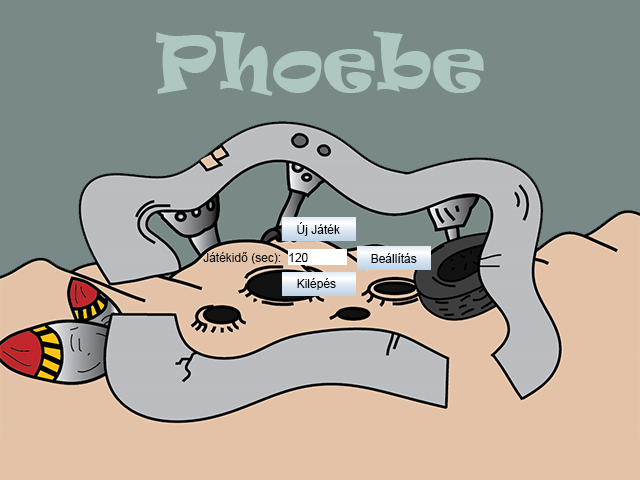
<style>
.page{position:relative;width:640px;height:480px;background:#798987}
.page>*{position:absolute;margin:0}
.t1{font:72px "Ravie";color:#afc8c4}
.t2{font:12px "ArialMT";color:#000000}
.t3{font:12px "ArialMT";color:#0c0e0e}
</style>
<div class="page">
<p class="t1" style="left:156px;top:31px;width:328px;height:65px">Phoebe</p>
<p class="t2" style="left:297px;top:222px;width:43px;height:14px">Új Játék</p>
<p class="t3" style="left:203px;top:252px;width:78px;height:12px">Játékidő (sec):</p>
<p class="t2" style="left:289px;top:253px;width:19px;height:9px">120</p>
<p class="t2" style="left:371px;top:253px;width:46px;height:10px">Beállítás</p>
<p class="t2" style="left:297px;top:278px;width:39px;height:12px">Kilépés</p>
</div>
